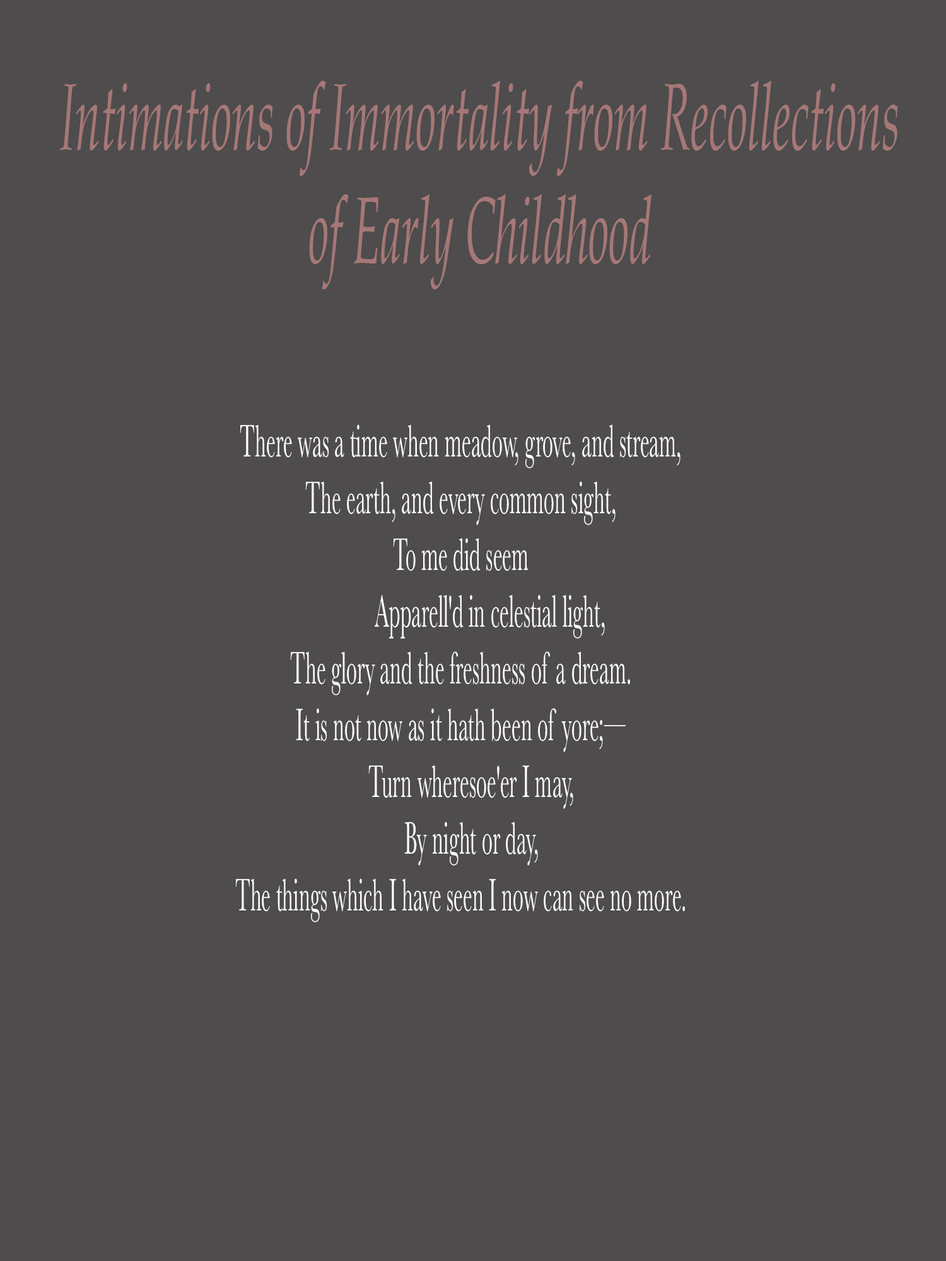
<style>
.page{position:relative;width:946px;height:1261px;background:#4e4c4c}
.page>*{position:absolute;margin:0}
.t1{font:94.6px "BookAntiqua-Italic";color:#a67777;scale:0.48 1}
.t2{font:47.3px "Baskerville";color:#ffffff;scale:0.45 1}
</style>
<div class="page">
<p class="t1" style="left:60px;top:81px;width:838px;height:208px;text-align:center">Intimations of Immortality from Recollections of Early Childhood</p>
<p class="t2" style="left:235px;top:424px;width:450px;height:498px;text-align:center">There was a time when meadow, grove, and stream,<br>The earth, and every common sight,<br>To me did seem<br>           Apparell'd in celestial light,<br>The glory and the freshness of a dream.<br>It is not now as it hath been of yore;—<br>    Turn wheresoe'er I may,<br>    By night or day,<br>The things which I have seen I now can see no more.</p>
</div>
